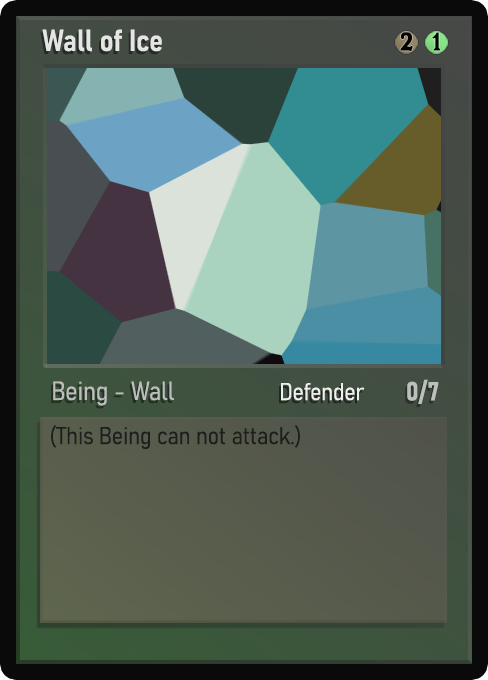
<style>
.page{position:relative;width:488px;height:680px}
.page>*{position:absolute;margin:0}
.t1{font:30px "Bahnschrift-SemiBoldSemiCondensed";color:#f2f2f2;font-weight:bold}
.t2{font:25px "WTRRoycroft";color:#000000;font-weight:bold;scale:1.09 1}
.t3{font:26px "Bahnschrift-LightSemiCondensed";color:#c8c8c8;font-weight:bold}
.t4{font:24px "Bahnschrift-LightSemiCondensed";color:#f0efef;font-weight:bold}
.t5{font:26px "Bahnschrift-BoldSemiCondensed";color:#bdbfbd;font-weight:bold}
.t6{font:24px "Bahnschrift-LightSemiCondensed";color:#1e1e1e;font-weight:bold}
</style>
<div class="page">
<p class="t1" style="left:42px;top:29px;width:120px;height:23px;opacity:0.9">Wall of Ice</p>
<p class="t2" style="left:400px;top:32px;width:13px;height:19px">2</p>
<p class="t2" style="left:432px;top:32px;width:9px;height:19px">1</p>
<p class="t3" style="left:53px;top:381px;width:121px;height:25px;opacity:0.9">Being - Wall</p>
<p class="t4" style="left:281px;top:383px;width:84px;height:18px">Defender</p>
<p class="t5" style="left:407px;top:379px;width:32px;height:25px">0/7</p>
<p class="t6" style="left:51px;top:425px;width:249px;height:24px">(This Being can not attack.)</p>
</div>
